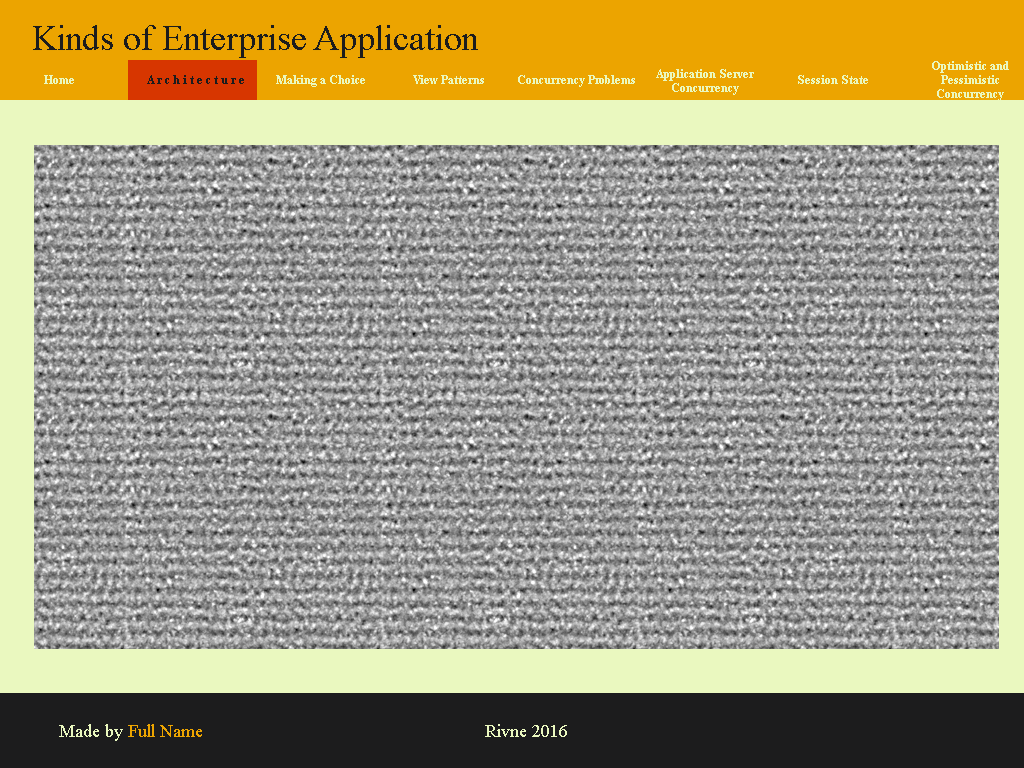
<style>
.page{position:relative;width:1024px;height:768px}
.page>*{position:absolute;margin:0}
.t1{font:36px "TimesNewRomanPSMT";color:#1c1c1d}
.t2{font:12px/14px "TimesNewRomanPS-BoldMT";color:#eaf8bf}
.t3{font:12px "TimesNewRomanPS-BoldMT";color:#eaf8bf}
.t4{font:12px "TimesNewRomanPS-BoldMT";color:#1c1c1d}
.t5{font:18px "TimesNewRomanPSMT";color:#eca400}
.t6{font:18px "TimesNewRomanPSMT";color:#eaf8bf}
</style>
<div class="page">
<p class="t1" style="left:33px;top:25px;width:445px;height:33px">Kinds of Enterprise Application</p>
<p class="t2" style="left:932px;top:61px;width:77px;height:40px;text-align:center">Optimistic and Pessimistic Concurrency Control</p>
<p class="t3" style="left:44px;top:75px;width:30px;height:9px">Home</p>
<p class="t4" style="left:147px;top:75px;width:97px;height:9px">A r c h i t e c t u r e</p>
<p class="t3" style="left:276px;top:75px;width:89px;height:12px">Making a Choice</p>
<p class="t3" style="left:413px;top:75px;width:71px;height:9px">View Patterns</p>
<p class="t3" style="left:518px;top:75px;width:117px;height:12px">Concurrency Problems</p>
<p class="t2" style="left:656px;top:69px;width:98px;height:26px;text-align:center">Application Server Concurrency</p>
<p class="t3" style="left:798px;top:75px;width:70px;height:9px">Session State</p>
<p class="t5" style="left:59px;top:724px;width:143px;height:17px"><span class="t6">Made by </span>Full Name</p>
<p class="t6" style="left:485px;top:724px;width:82px;height:13px">Rivne 2016</p>
</div>
